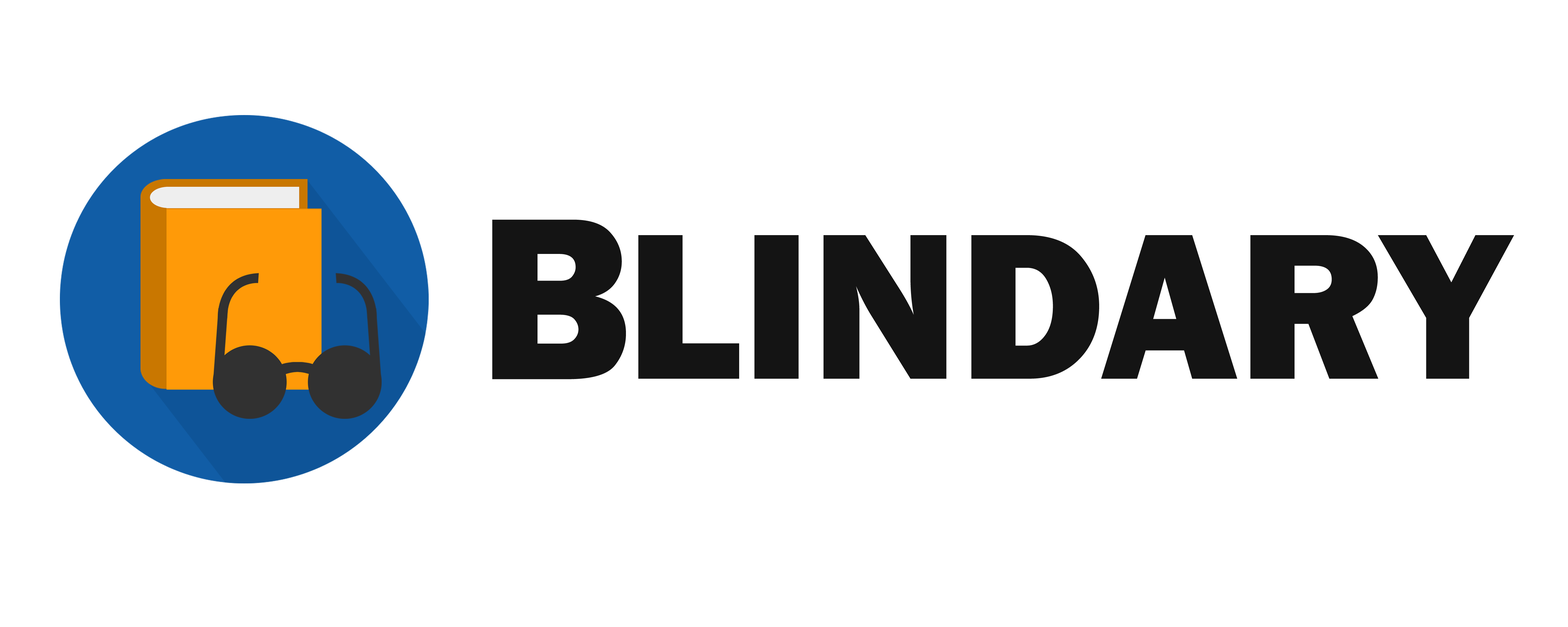
<style>
.page{position:relative;width:1568px;height:627px;background:#ffffff}
.page>*{position:absolute;margin:0}
.t1{font:239.3px "FranklinGothic-Heavy";color:#141414}
.t2{font:215.3px "FranklinGothic-Heavy";color:#141414}
</style>
<div class="page">
<p class="t1" style="left:492px;top:220px;width:134px;height:159px">B</p>
<p class="t2" style="left:638px;top:235px;width:876px;height:144px">LINDARY</p>
</div>
